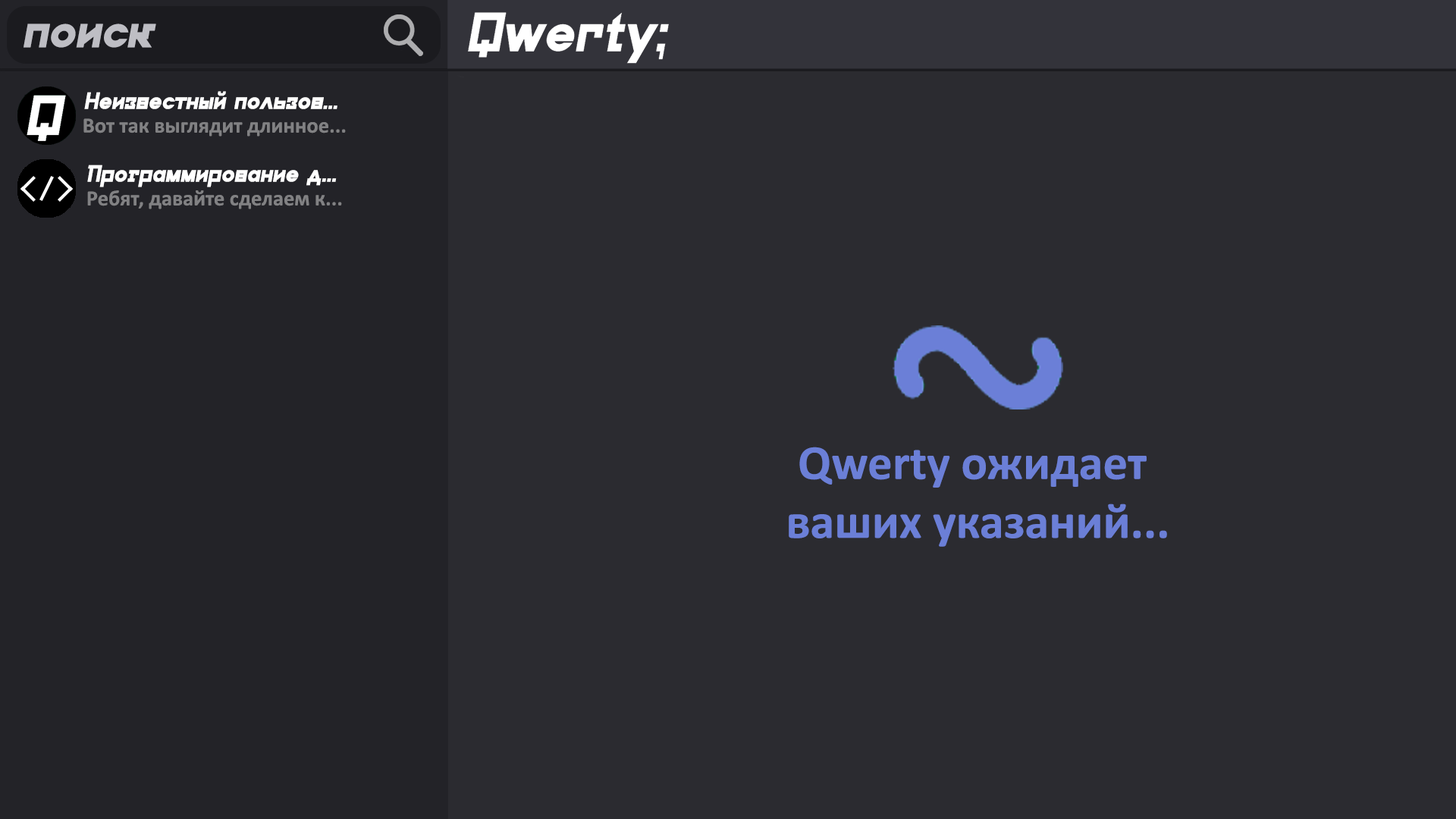
<style>
.page{position:relative;width:1456px;height:819px;background:#2b2b30}
.page>*{position:absolute;margin:0}
.t1{font:43.2px "GaliverSansObliques-Bold";color:#bebec4}
.t2{font:21.6px "GaliverSansObliques-Bold";color:#ffffff}
.t3{font:21.6px "Calibri-Bold";color:#818183}
.t4{font:49.1px "Calibri-Bold";color:#6b7fd7}
</style>
<div class="page">
<p class="t1" style="left:24px;top:24px;width:132px;height:24px">поиск</p>
<p class="t2" style="left:84px;top:91px;width:253px;height:18px">Неизвестный пользов...</p>
<p class="t3" style="left:83px;top:118px;width:263px;height:18px">Вот так выглядит длинное...</p>
<p class="t2" style="left:87px;top:165px;width:250px;height:22px">Программирование д...</p>
<p class="t3" style="left:87px;top:190px;width:255px;height:19px">Ребят, давайте сделаем к...</p>
<p class="t4" style="left:789px;top:447px;width:378px;height:100px;text-align:center">Qwerty ожидает <br>ваших указаний...</p>
</div>
